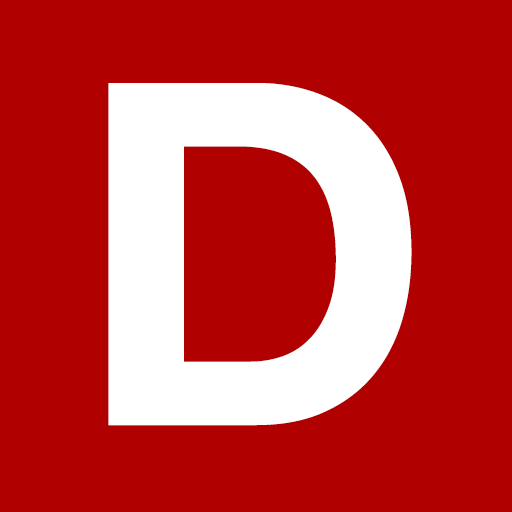
<style>
.page{position:relative;width:512px;height:512px;background:#b00000}
.page>*{position:absolute;margin:0}
.t1{font:479px "HelveticaNeue-Bold";color:#ffffff}
</style>
<div class="page">
<p class="t1" style="left:108px;top:83px;width:304px;height:343px">D</p>
<p class="t1" style="left:108px;top:83px;width:304px;height:343px">D</p>
</div>
